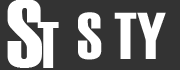
<style>
.page{position:relative;width:180px;height:70px;background:#333333}
.page>*{position:absolute;margin:0}
.t1{font:94.9px "Haettenschweiler";color:#ffffff;scale:1.03 1}
.t2{font:66.1px "Haettenschweiler";color:#ffffff}
.t3{font:64.6px "Haettenschweiler";color:#ffffff}
</style>
<div class="page">
<p class="t1" style="left:7px;top:0px;width:35px;height:68px">S</p>
<p class="t2" style="left:78px;top:12px;width:88px;height:48px">S TY</p>
<p class="t3" style="left:37px;top:22px;width:22px;height:46px">T</p>
</div>
